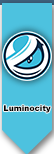
<style>
.page{position:relative;width:54px;height:154px;background:#4dc2df}
.page>*{position:absolute;margin:0}
.t1{font:7.9px "Arial-Black";letter-spacing:-0.01em;color:#000000}
</style>
<div class="page">
<p class="t1" style="left:3px;top:105px;width:48px;height:8px">Luminocity</p>
</div>
